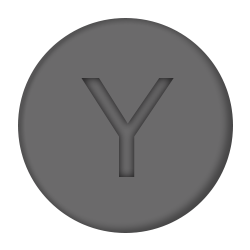
<style>
.page{position:relative;width:250px;height:250px;background:#6b6a6b}
.page>*{position:absolute;margin:0}
.t1{font:157.6px "LucidaConsole";color:#6b6a6b}
</style>
<div class="page">
<p class="t1" style="left:81px;top:78px;width:93px;height:99px">Y</p>
</div>
